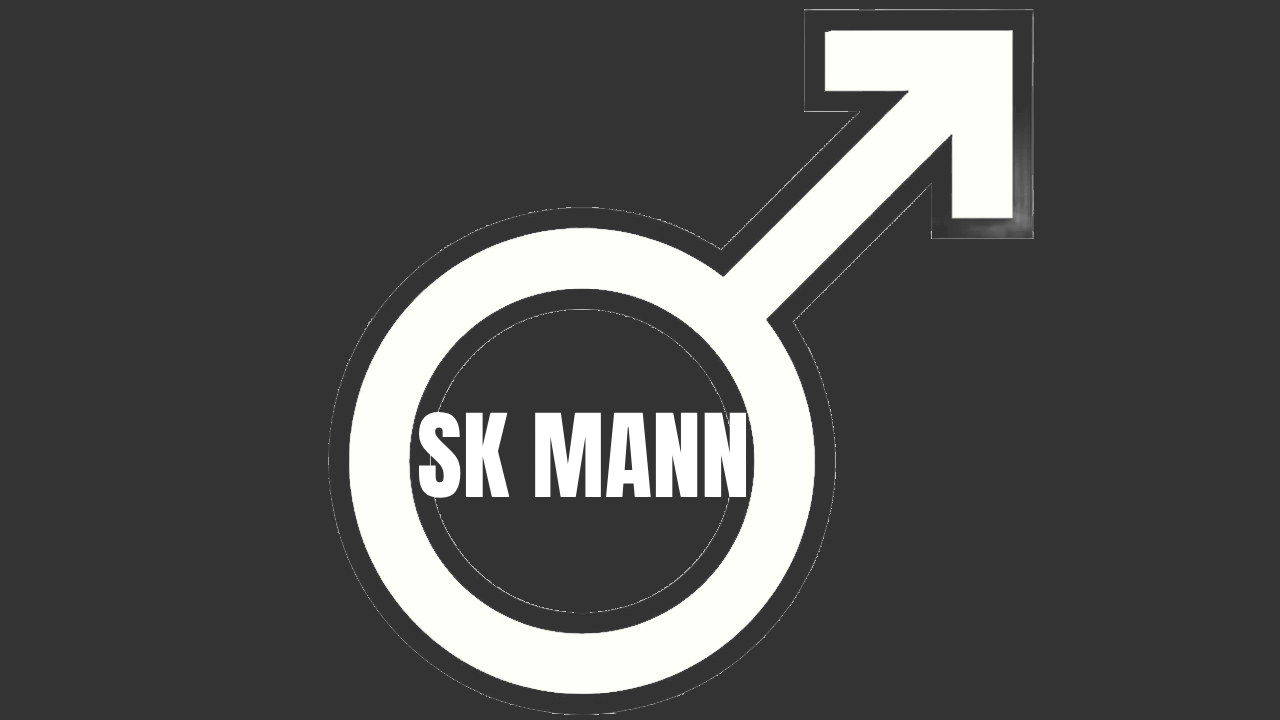
<style>
.page{position:relative;width:1280px;height:720px;background:#333333}
.page>*{position:absolute;margin:0}
.t1{font:98px "Anton-Regular";color:#ffffff}
</style>
<div class="page">
<p class="t1" style="left:419px;top:412px;width:328px;height:86px">SK MANN</p>
</div>
